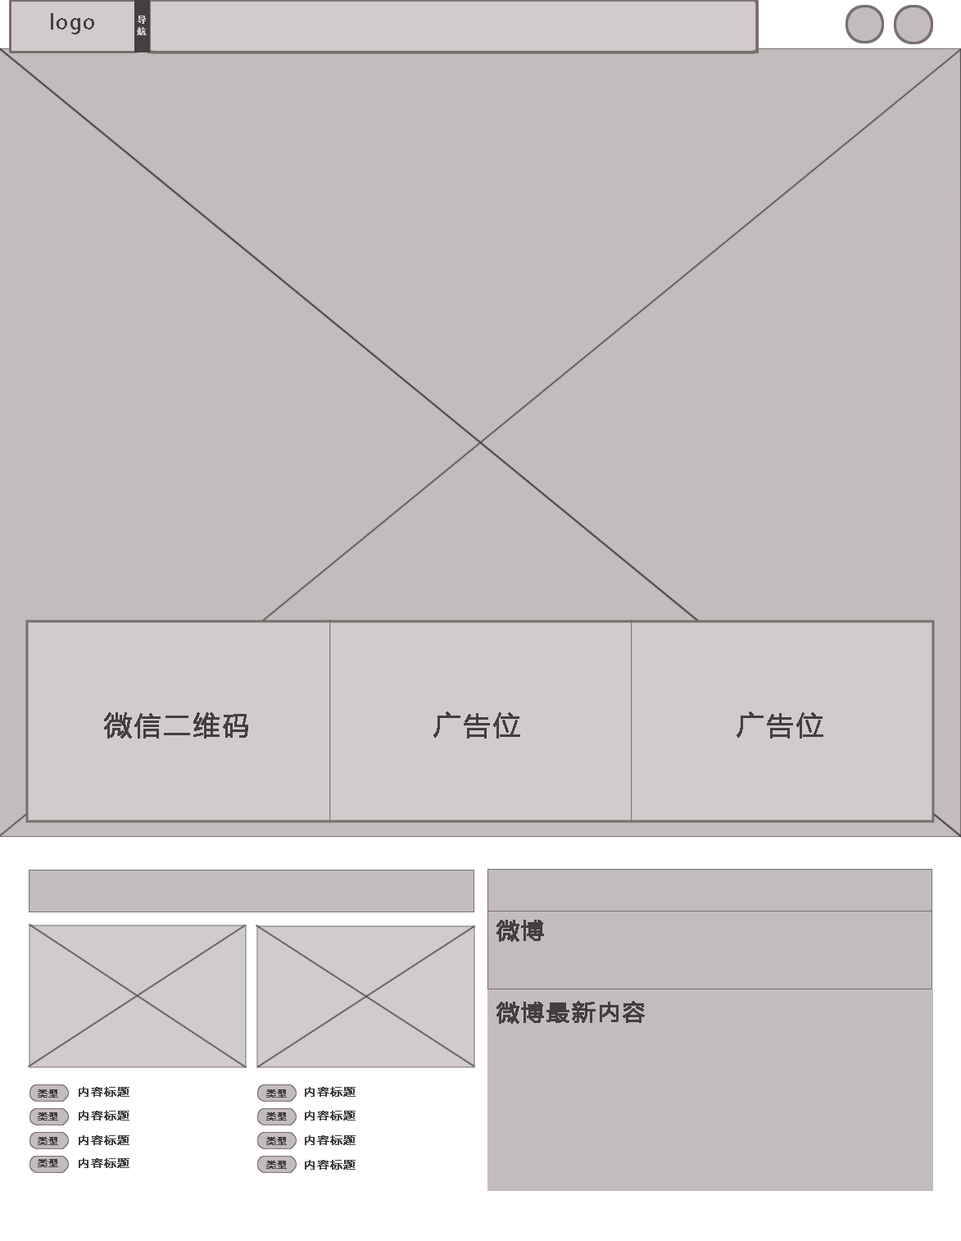
<style>
.page{position:relative;width:961px;height:1241px;background:#c3bcbc}
.page>*{position:absolute;margin:0}
.t1{font:20.6px "AdobeFanHeitiStd-Bold";letter-spacing:0.06em;color:#434040}
.t2{font:9.1px/11.5px "SimHei";letter-spacing:0.06em;color:#d2cbcb;font-weight:bold}
.t3{font:9.1px/11.5px "SimHei";letter-spacing:0.06em;color:#d2cbcb}
.t4{font:27.1px "MicrosoftYaHei";letter-spacing:0.06em;color:#434040;font-weight:bold}
.t5{font:23px "MicrosoftYaHei";letter-spacing:0.06em;color:#434040;font-weight:bold}
.t6{font:9.1px "MicrosoftYaHei";letter-spacing:0.06em;color:#434040;font-weight:bold}
.t7{font:11.5px "MicrosoftYaHei";letter-spacing:0.06em;color:#434040;font-weight:bold}
</style>
<div class="page">
<p class="t1" style="left:51px;top:13px;width:43px;height:21px">logo</p>
<p class="t2" style="left:137px;top:16px;width:10px;height:19px"><span class="t3"><br></span>导<br>航</p>
<p class="t4" style="left:104px;top:712px;width:144px;height:26px">微信二维码</p>
<p class="t4" style="left:433px;top:711px;width:87px;height:27px">广告位</p>
<p class="t4" style="left:737px;top:711px;width:87px;height:27px">广告位</p>
<p class="t5" style="left:497px;top:919px;width:47px;height:23px">微博</p>
<p class="t5" style="left:497px;top:1001px;width:148px;height:22px">微博最新内容</p>
<p class="t6" style="left:38px;top:1089px;width:20px;height:8px">类型</p>
<p class="t7" style="left:79px;top:1087px;width:50px;height:9px">内容标题</p>
<p class="t6" style="left:266px;top:1089px;width:21px;height:8px">类型</p>
<p class="t7" style="left:305px;top:1087px;width:51px;height:9px">内容标题</p>
<p class="t6" style="left:38px;top:1112px;width:20px;height:8px">类型</p>
<p class="t7" style="left:79px;top:1110px;width:50px;height:10px">内容标题</p>
<p class="t6" style="left:266px;top:1112px;width:21px;height:8px">类型</p>
<p class="t7" style="left:305px;top:1110px;width:51px;height:10px">内容标题</p>
<p class="t6" style="left:38px;top:1137px;width:20px;height:8px">类型</p>
<p class="t7" style="left:79px;top:1135px;width:50px;height:10px">内容标题</p>
<p class="t6" style="left:266px;top:1137px;width:21px;height:8px">类型</p>
<p class="t7" style="left:305px;top:1135px;width:51px;height:10px">内容标题</p>
<p class="t7" style="left:79px;top:1158px;width:50px;height:10px">内容标题</p>
<p class="t6" style="left:38px;top:1159px;width:20px;height:8px">类型</p>
<p class="t6" style="left:266px;top:1160px;width:21px;height:8px">类型</p>
<p class="t7" style="left:305px;top:1159px;width:51px;height:10px">内容标题</p>
</div>
